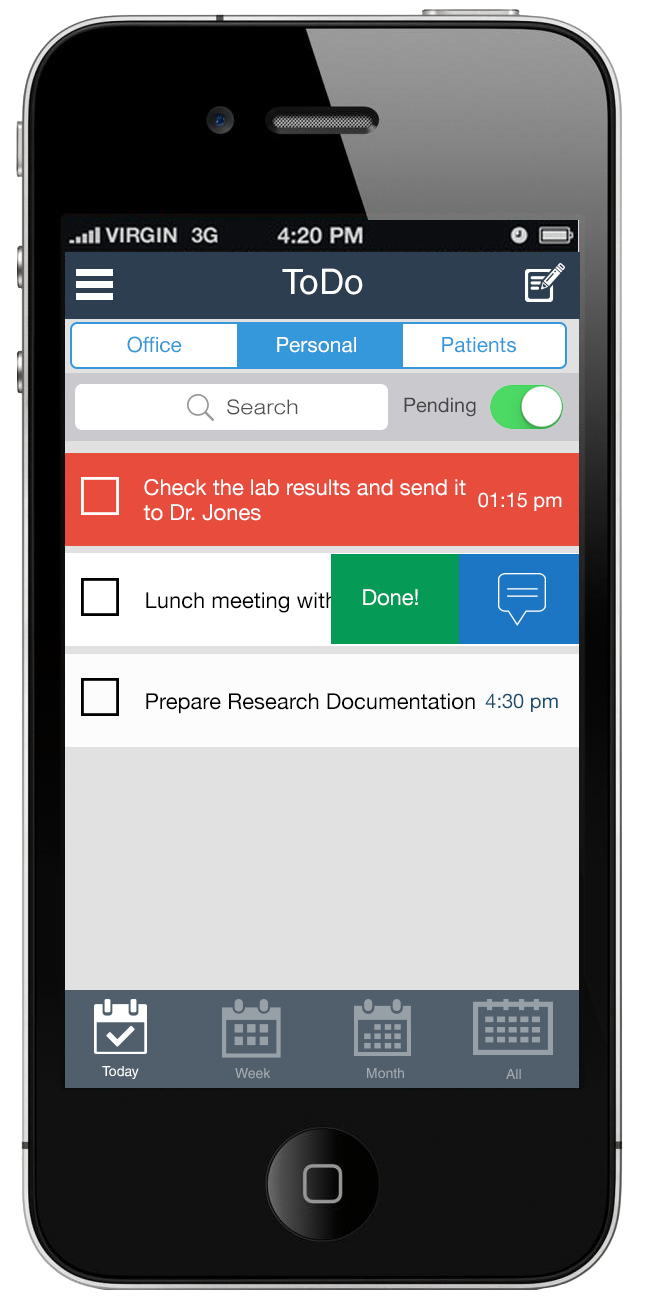
<style>
.page{position:relative;width:648px;height:1300px}
.page>*{position:absolute;margin:0}
.t1{font:35px "HelveticaLT";color:#ffffff}
.t2{font:21.1px "HelveticaNeue";color:#3498db}
.t3{font:21.1px "HelveticaNeue";color:#ffffff}
.t4{font:20px "Swiss721BT-LightExtended";color:#505050}
.t5{font:20px "HelveticaNeue";color:#2f2f2f}
.t6{font:22px/25px "HelveticaNeue";color:#ffffff}
.t7{font:20px "HelveticaNeue";color:#ffffff}
.t8{font:20px "HelveticaNeue";color:#ffffff;text-transform:uppercase}
.t9{font:22px "HelveticaNeue"}
.t10{font:22px "HelveticaNeue";color:#ffffff}
.t11{font:22px "HelveticaNeue";color:#000000}
.t12{font:20px "HelveticaNeue";color:#1b4d6f;text-transform:uppercase}
.t13{font:20px "HelveticaNeue";color:#1b4d6f}
.t14{font:14px "HelveticaLT";color:#ffffff}
.t15{font:14px "HelveticaLT";color:#a4aab0}
</style>
<div class="page">
<p class="t1" style="left:282px;top:268px;width:81px;height:27px">ToDo</p>
<p class="t2" style="left:127px;top:336px;width:55px;height:17px">Office</p>
<p class="t3" style="left:277px;top:337px;width:79px;height:16px">Personal</p>
<p class="t2" style="left:442px;top:337px;width:74px;height:16px">Patients</p>
<p class="t4" style="left:227px;top:399px;width:71px;height:16px">Search</p>
<p class="t5" style="left:404px;top:397px;width:72px;height:20px;opacity:0.9">Pending</p>
<p class="t6" style="left:143px;top:479px;width:323px;height:42px">Check the lab results and send it to Dr. Jones</p>
<p class="t7" style="left:478px;top:492px;width:84px;height:19px"><span class="t8">01</span>:15 pm</p>
<p class="t9" style="left:146px;top:592px;width:287px;height:21px">Lunch meeting with Dr.Raghu</p>
<p class="t10" style="left:363px;top:589px;width:55px;height:17px">Done!</p>
<p class="t11" style="left:146px;top:693px;width:329px;height:21px">Prepare Research Documentation</p>
<p class="t12" style="left:485px;top:693px;width:73px;height:19px">4:30<span class="t13"> pm</span></p>
<p class="t14" style="left:102px;top:1066px;width:37px;height:13px">Today</p>
<p class="t15" style="left:235px;top:1068px;width:36px;height:11px">Week</p>
<p class="t15" style="left:367px;top:1068px;width:37px;height:11px">Month</p>
<p class="t15" style="left:506px;top:1069px;width:15px;height:10px">All</p>
</div>
